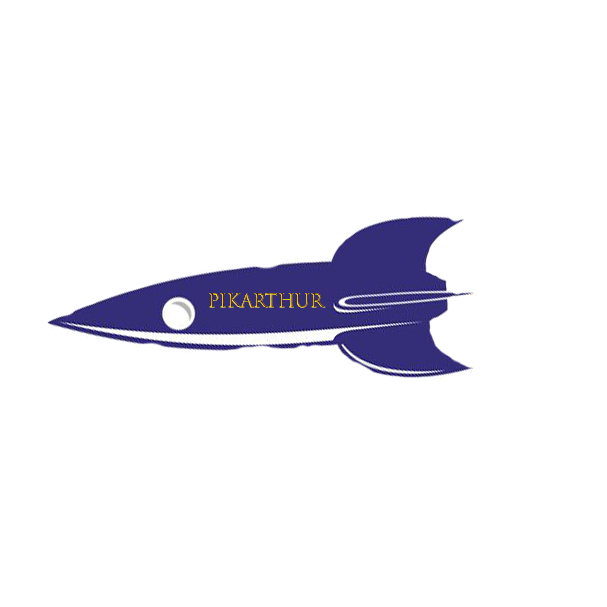
<style>
.page{position:relative;width:607px;height:607px;background:#ffffff}
.page>*{position:absolute;margin:0}
.t1{font:18px "TrajanColor-Concept"}
</style>
<div class="page">
<p class="t1" style="left:209px;top:293px;width:117px;height:15px">Pikarthur</p>
</div>
